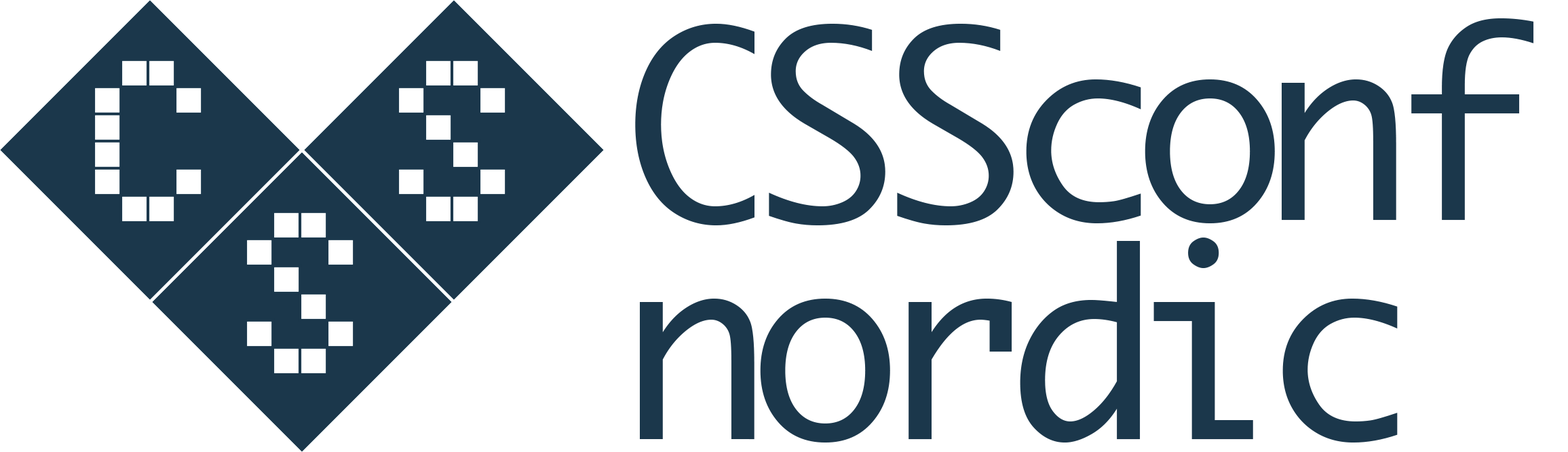
<style>
.page{position:relative;width:1568px;height:452px;background:#ffffff}
.page>*{position:absolute;margin:0}
.t1{font:251.6px/219.1px "Monaco";letter-spacing:-0.09em;color:#1b374b}
</style>
<div class="page">
<p class="t1" style="left:635px;top:18px;width:899px;height:424px">CSSconf<br>nordic</p>
</div>
